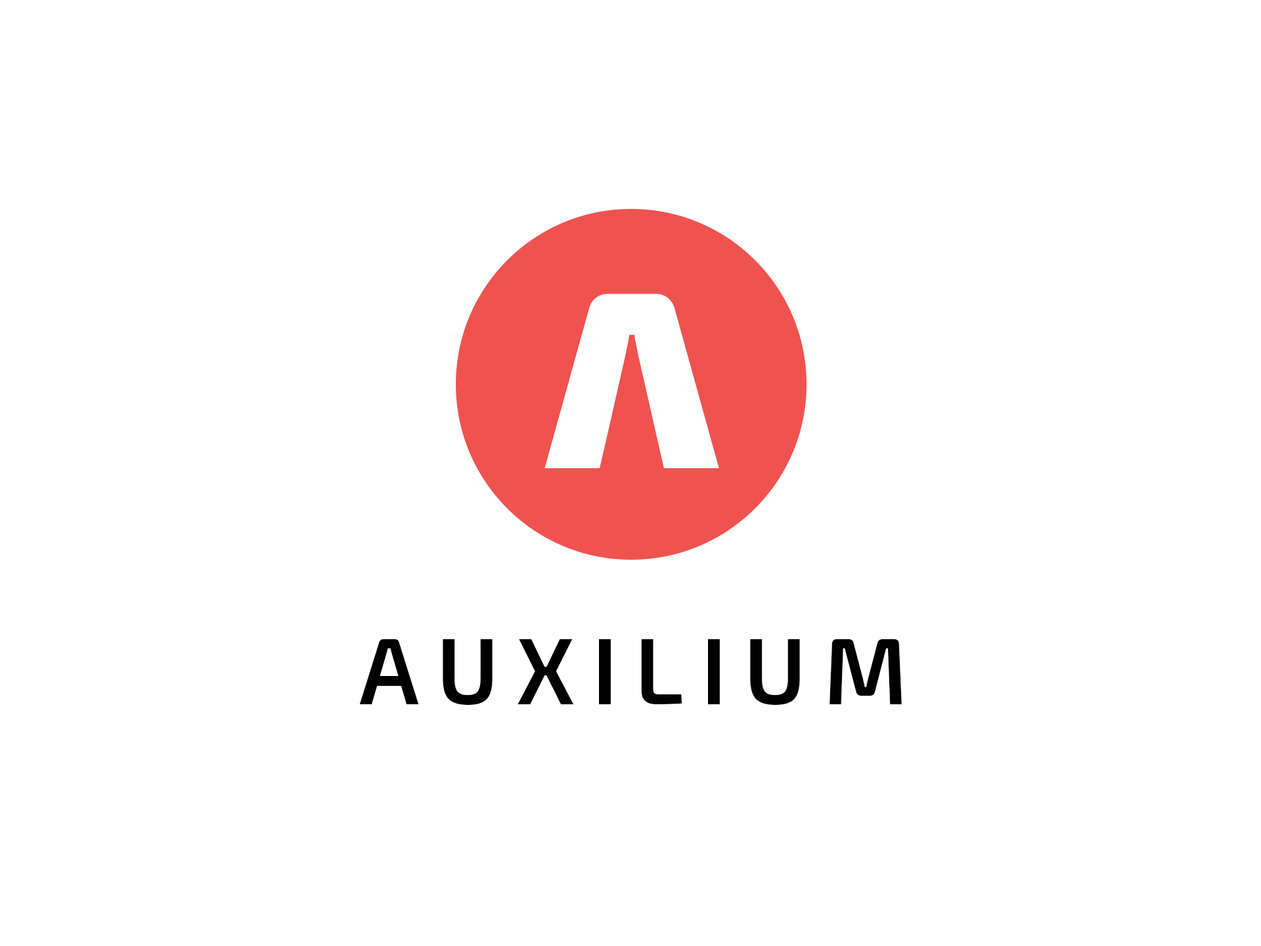
<style>
.page{position:relative;width:1261px;height:946px;background:#ffffff}
.page>*{position:absolute;margin:0}
.t1{font:93.9px "Exo2-SemiBold";letter-spacing:0.18em;color:#000000}
</style>
<div class="page">
<p class="t1" style="left:359px;top:639px;width:543px;height:66px">AUXILIUM</p>
</div>
